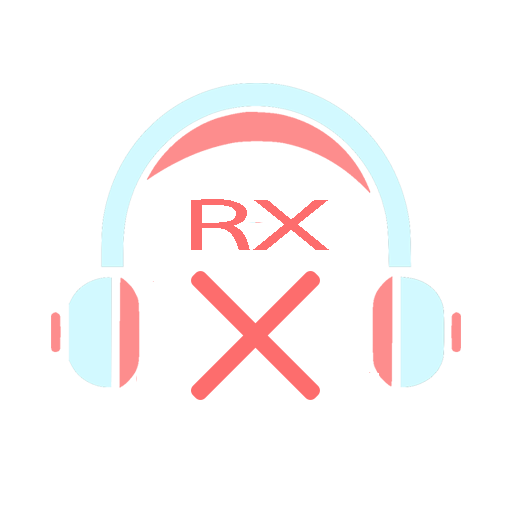
<style>
.page{position:relative;width:512px;height:512px;background:#ffffff}
.page>*{position:absolute;margin:0}
.t1{font:106px "THSarabunPSK-Bold";color:#fd6d6d;scale:1.68 1}
</style>
<div class="page">
<p class="t1" style="left:191px;top:199px;width:138px;height:51px">RX</p>
</div>
